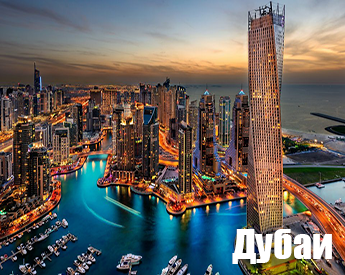
<style>
.page{position:relative;width:345px;height:275px}
.page>*{position:absolute;margin:0}
.t1{font:38px "Impact";color:#ffffff}
</style>
<div class="page">
<p class="t1" style="left:232px;top:229px;width:100px;height:35px">Дубаи</p>
</div>
